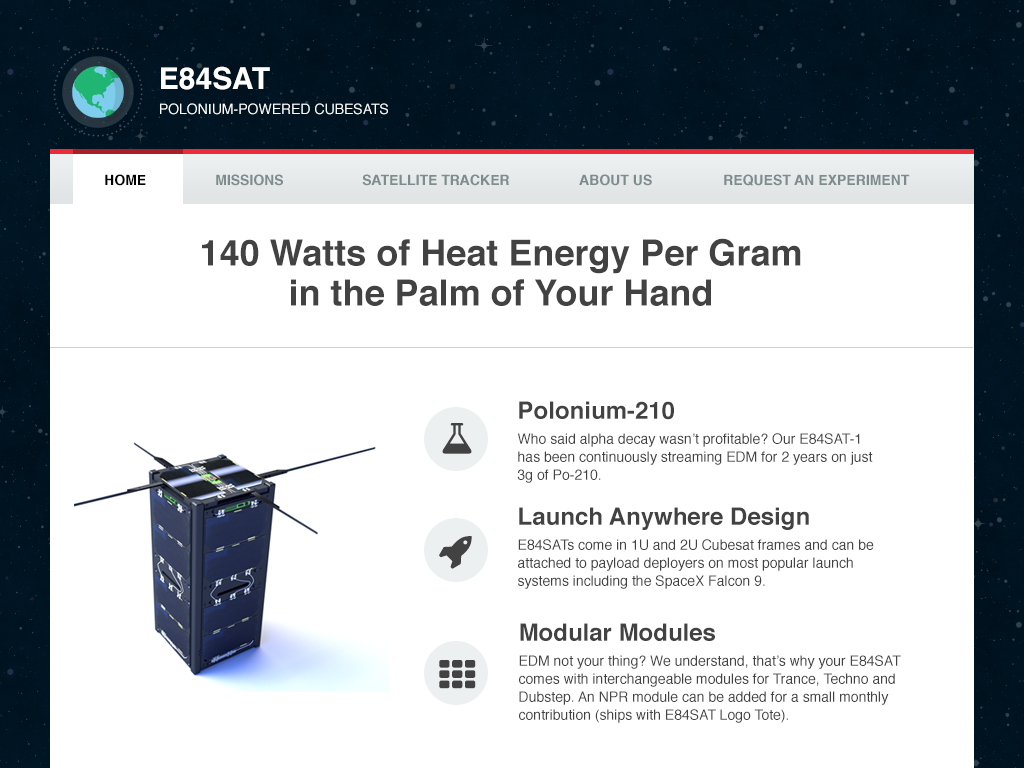
<style>
.page{position:relative;width:1024px;height:768px;background:#ffffff}
.page>*{position:absolute;margin:0}
.t1{font:30px "Helvetica-Bold";color:#ffffff}
.t2{font:14px "Helvetica";color:#ffffff}
.t3{font:14px "Helvetica-Bold";color:#000000}
.t4{font:14px "Helvetica-Bold";color:#7f8c8d}
.t5{font:36px/40px "Helvetica-Bold";color:#424242}
.t6{font:24px "Helvetica-Bold";color:#424242}
.t7{font:14px/18px "Helvetica";color:#424242}
</style>
<div class="page">
<p class="t1" style="left:161px;top:66px;width:109px;height:24px">E84SAT</p>
<p class="t2" style="left:160px;top:103px;width:228px;height:12px">POLONIUM-POWERED CUBESATS</p>
<p class="t3" style="left:105px;top:174px;width:41px;height:12px">HOME</p>
<p class="t4" style="left:216px;top:174px;width:67px;height:12px">MISSIONS</p>
<p class="t4" style="left:362px;top:174px;width:147px;height:12px">SATELLITE TRACKER</p>
<p class="t4" style="left:579px;top:174px;width:73px;height:12px">ABOUT US</p>
<p class="t4" style="left:724px;top:174px;width:186px;height:12px">REQUEST AN EXPERIMENT</p>
<p class="t5" style="left:202px;top:238px;width:599px;height:68px;text-align:center">140 Watts of Heat Energy Per Gram<br>in the Palm of Your Hand</p>
<p class="t6" style="left:519px;top:401px;width:155px;height:19px">Polonium-210</p>
<p class="t7" style="left:517px;top:433px;width:356px;height:50px">Who said alpha decay wasn’t profitable? Our E84SAT-1<br>has been continuously streaming EDM for 2 years on just<br>3g of Po-210.</p>
<p class="t6" style="left:519px;top:507px;width:290px;height:23px">Launch Anywhere Design</p>
<p class="t7" style="left:518px;top:539px;width:356px;height:50px">E84SATs come in 1U and 2U Cubesat frames and can be<br>attached to payload deployers on most popular launch<br>systems including the SpaceX Falcon 9.</p>
<p class="t6" style="left:520px;top:623px;width:195px;height:18px">Modular Modules</p>
<p class="t7" style="left:519px;top:655px;width:382px;height:68px">EDM not your thing? We understand, that’s why your E84SAT<br>comes with interchangeable modules for Trance, Techno and<br>Dubstep. An NPR module can be added for a small monthly<br>contribution (ships with E84SAT Logo Tote).</p>
</div>
